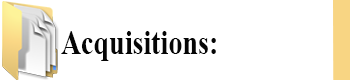
<style>
.page{position:relative;width:350px;height:80px;background:#ffffff}
.page>*{position:absolute;margin:0}
.t1{font:34.3px "TimesNewRomanPS-BoldMT";color:#050505;scale:0.82 1}
</style>
<div class="page">
<p class="t1" style="left:61px;top:31px;width:155px;height:30px">Acquisitions:</p>
</div>
